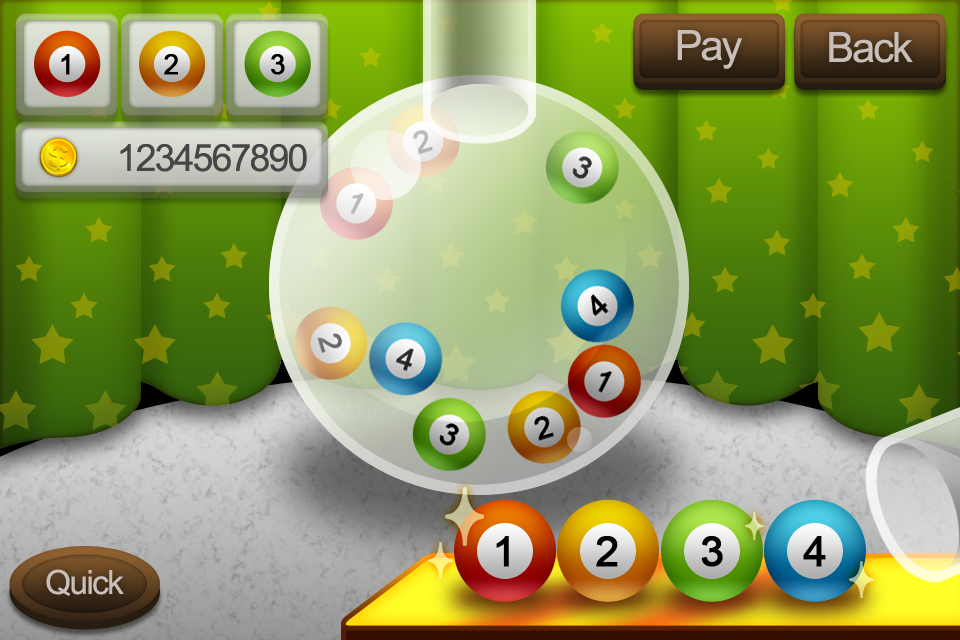
<style>
.page{position:relative;width:960px;height:640px}
.page>*{position:absolute;margin:0}
.t1{font:41.7px "ArialMT";letter-spacing:-0.05em;color:#c8bfbb}
.t2{font:27.1px "ArialMT";color:#000000;font-weight:bold}
.t3{font:37.5px "ArialMT";letter-spacing:-0.05em;color:#464646}
.t4{font:41.7px "ArialMT";color:#000000;font-weight:bold}
.t5{font:33.3px "ArialMT";letter-spacing:-0.05em;color:#c8bfbb}
</style>
<div class="page">
<p class="t1" style="left:677px;top:30px;width:65px;height:39px">Pay</p>
<p class="t1" style="left:829px;top:32px;width:84px;height:31px">Back</p>
<p class="t2" style="left:61px;top:54px;width:9px;height:21px">1</p>
<p class="t2" style="left:164px;top:54px;width:14px;height:21px">2</p>
<p class="t2" style="left:271px;top:54px;width:14px;height:21px">3</p>
<p class="t3" style="left:120px;top:144px;width:187px;height:28px">1234567890</p>
<p class="t4" style="left:496px;top:536px;width:13px;height:31px">1</p>
<p class="t4" style="left:596px;top:536px;width:22px;height:31px">2</p>
<p class="t4" style="left:701px;top:536px;width:22px;height:31px">3</p>
<p class="t4" style="left:803px;top:536px;width:23px;height:31px">4</p>
<p class="t5" style="left:46px;top:569px;width:78px;height:27px">Quick</p>
</div>
